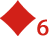
<style>
.page{position:relative;width:52px;height:36px;background:#ffffff}
.page>*{position:absolute;margin:0}
.t1{font:23.4px "MyriadPro-Regular";letter-spacing:-0.1em;color:#d22018;font-weight:bold}
</style>
<div class="page">
<p class="t1" style="left:37px;top:19px;width:12px;height:17px">6</p>
</div>
